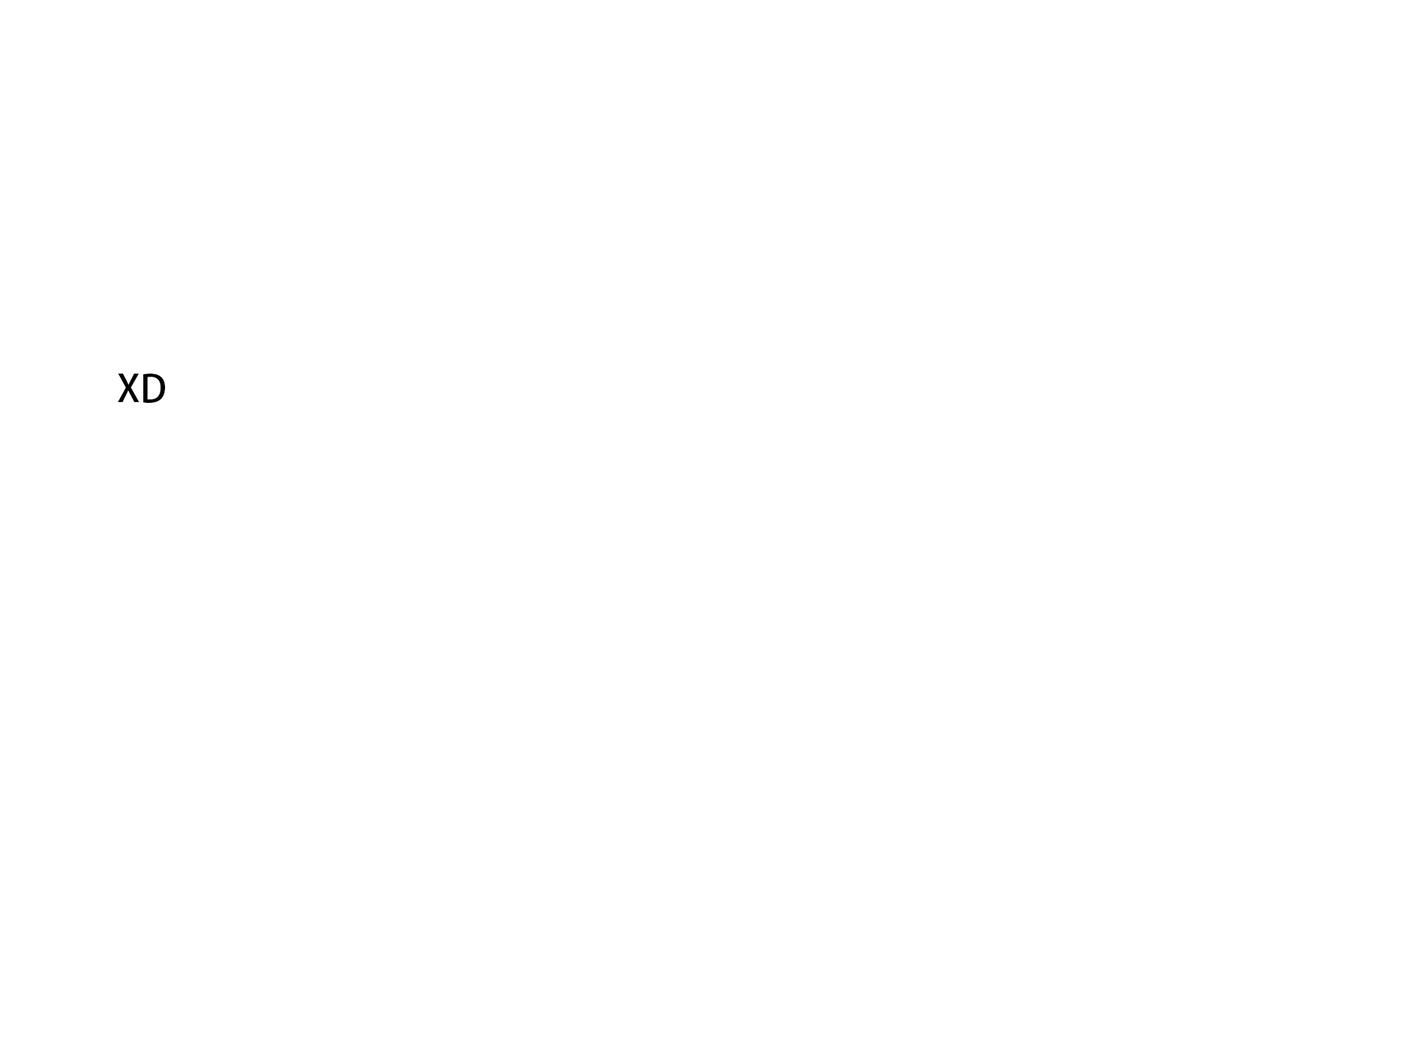
<style>
.page{position:relative;width:1418px;height:1063px;background:#ffffff}
.page>*{position:absolute;margin:0}
.t1{font:9px "AdobeFanHeitiStd-Bold";color:#000000}
</style>
<div class="page">
<p class="t1" style="left:118px;top:374px;width:47px;height:29px">XD</p>
</div>
